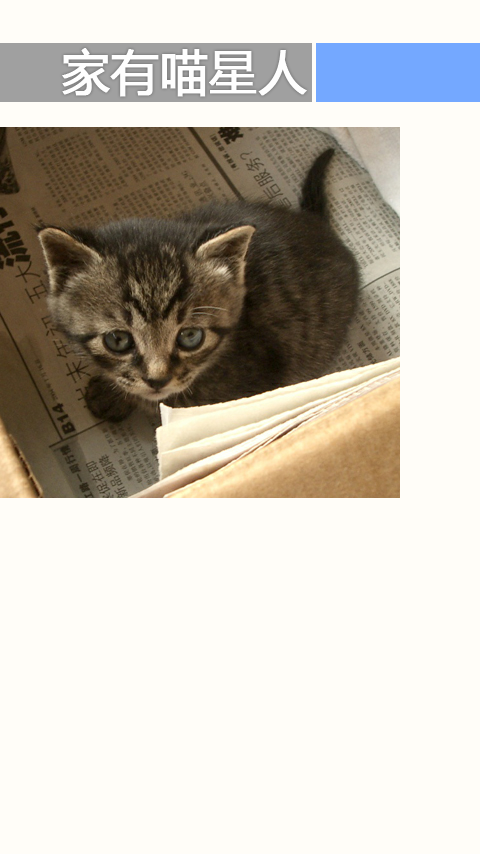
<style>
.page{position:relative;width:480px;height:854px;background:#fffdf8}
.page>*{position:absolute;margin:0}
.t1{font:48px "MicrosoftYaHei";color:#fefefe;font-weight:bold}
</style>
<div class="page">
<p class="t1" style="left:62px;top:48px;width:245px;height:49px">家有喵星人</p>
</div>
